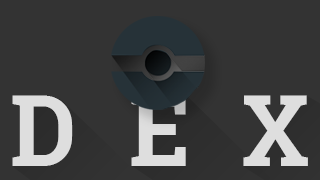
<style>
.page{position:relative;width:320px;height:180px;background:#333333}
.page>*{position:absolute;margin:0}
.t1{font:98.5px "RobotoSlab-Bold";letter-spacing:0.55em;color:#dedede}
</style>
<div class="page">
<p class="t1" style="left:12px;top:95px;width:296px;height:71px">DEX</p>
</div>
